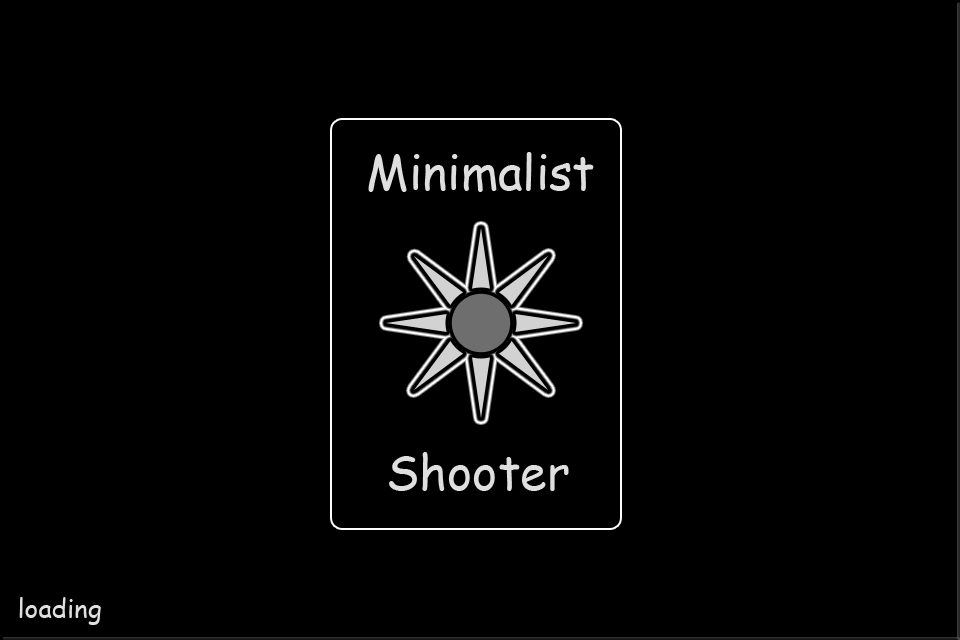
<style>
.page{position:relative;width:960px;height:640px;background:#000000}
.page>*{position:absolute;margin:0}
.t1{font:48px "ComicSansMS";color:#dfdfdf}
.t2{font:26px "ComicSansMS";color:#dfdfdf}
</style>
<div class="page">
<p class="t1" style="left:368px;top:152px;width:226px;height:40px">Minimalist</p>
<p class="t1" style="left:389px;top:452px;width:180px;height:39px">Shooter</p>
<p class="t2" style="left:19px;top:597px;width:82px;height:28px">loading</p>
</div>
